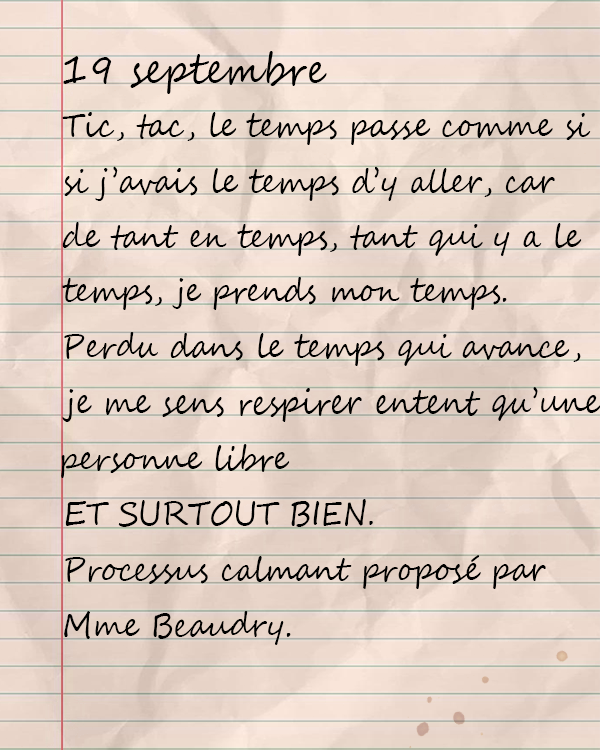
<style>
.page{position:relative;width:600px;height:750px}
.page>*{position:absolute;margin:0}
.t1{font:41.8px "SegoeScript";color:#000000;scale:0.9 1}
.t2{font:33.3px "SegoeScript";color:#000000;scale:0.9 1}
</style>
<div class="page">
<p class="t1" style="left:63px;top:51px;width:264px;height:43px">19 septembre</p>
<p class="t2" style="left:62px;top:112px;width:529px;height:33px">Tic, tac, le temps passe comme si</p>
<p class="t2" style="left:64px;top:166px;width:491px;height:35px">si j’avais le temps d’y aller, car</p>
<p class="t2" style="left:62px;top:222px;width:520px;height:34px">de tant en temps, tant qui y a le</p>
<p class="t2" style="left:62px;top:277px;width:445px;height:33px">temps, je prends mon temps.</p>
<p class="t2" style="left:64px;top:332px;width:517px;height:34px">Perdu dans le temps qui avance,</p>
<p class="t2" style="left:62px;top:387px;width:539px;height:35px">je me sens respirer entent qu’une</p>
<p class="t2" style="left:61px;top:444px;width:229px;height:34px">personne libre</p>
<p class="t2" style="left:65px;top:499px;width:308px;height:28px">ET SURTOUT BIEN.</p>
<p class="t2" style="left:65px;top:555px;width:481px;height:34px">Processus calmant proposé par Mme Beaudry.</p>
<p class="t2" style="left:64px;top:611px;width:227px;height:34px">Mme Beaudry.</p>
</div>
